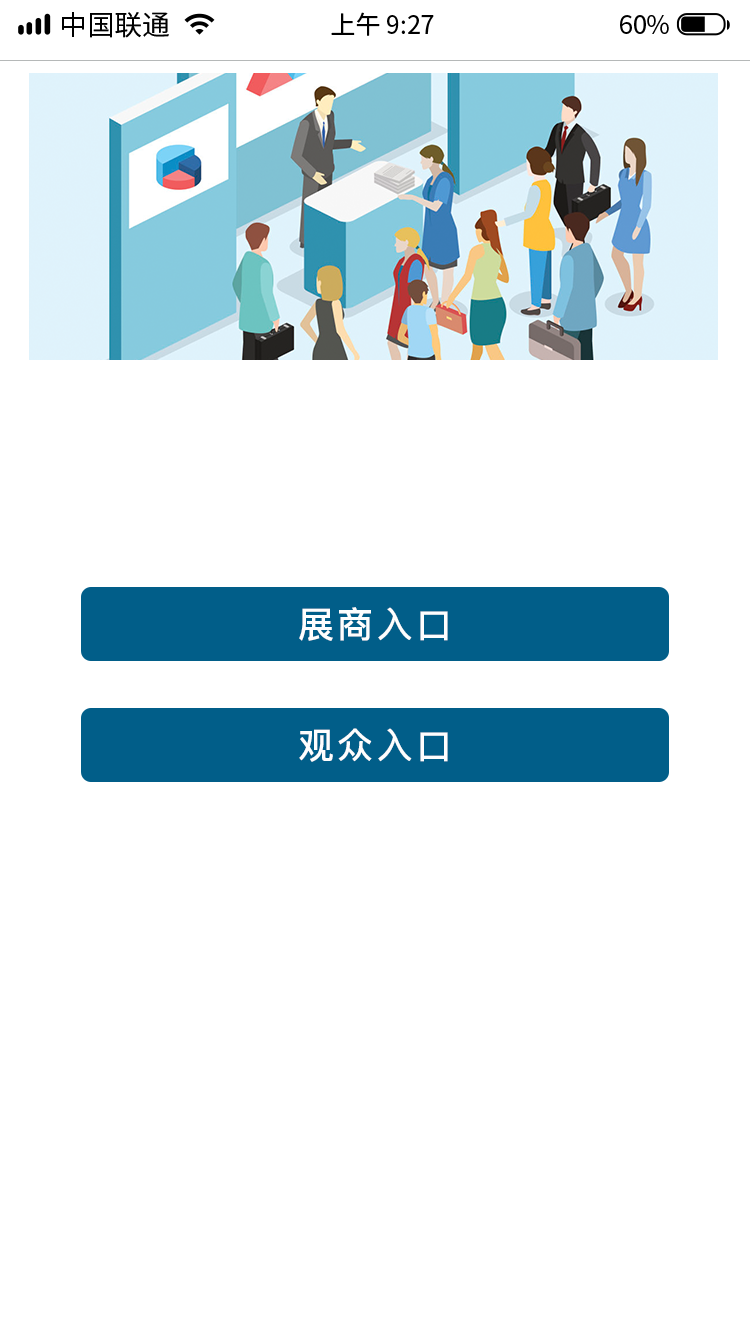
<style>
.page{position:relative;width:750px;height:1334px;background:#ffffff}
.page>*{position:absolute;margin:0}
.t1{font:27.8px "SourceHanSansCN-Regular";color:#000000}
.t2{font:25px "SourceHanSansCN-Regular";color:#000000}
.t3{font:36px "PingFang-SC-Bold";letter-spacing:0.1em;color:#fefefe}
</style>
<div class="page">
<p class="t1" style="left:62px;top:12px;width:107px;height:26px">中国联通</p>
<p class="t1" style="left:62px;top:12px;width:107px;height:26px">中国联通</p>
<p class="t2" style="left:331px;top:12px;width:103px;height:24px">上午 9:27</p>
<p class="t2" style="left:331px;top:12px;width:103px;height:24px">上午 9:27</p>
<p class="t2" style="left:620px;top:15px;width:49px;height:19px">60%</p>
<p class="t2" style="left:620px;top:15px;width:49px;height:19px">60%</p>
<p class="t3" style="left:299px;top:607px;width:149px;height:34px">展商入口</p>
<p class="t3" style="left:299px;top:728px;width:149px;height:34px">观众入口</p>
</div>
